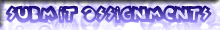
<style>
.page{position:relative;width:220px;height:30px}
.page>*{position:absolute;margin:0}
.t1{font:17px "woodcutterSummerShadows";letter-spacing:-0.025em;scale:1.08 1}
</style>
<div class="page">
<p class="t1" style="left:5px;top:5px;width:207px;height:19px">SUBMIT ASSIGNMENTS</p>
</div>
